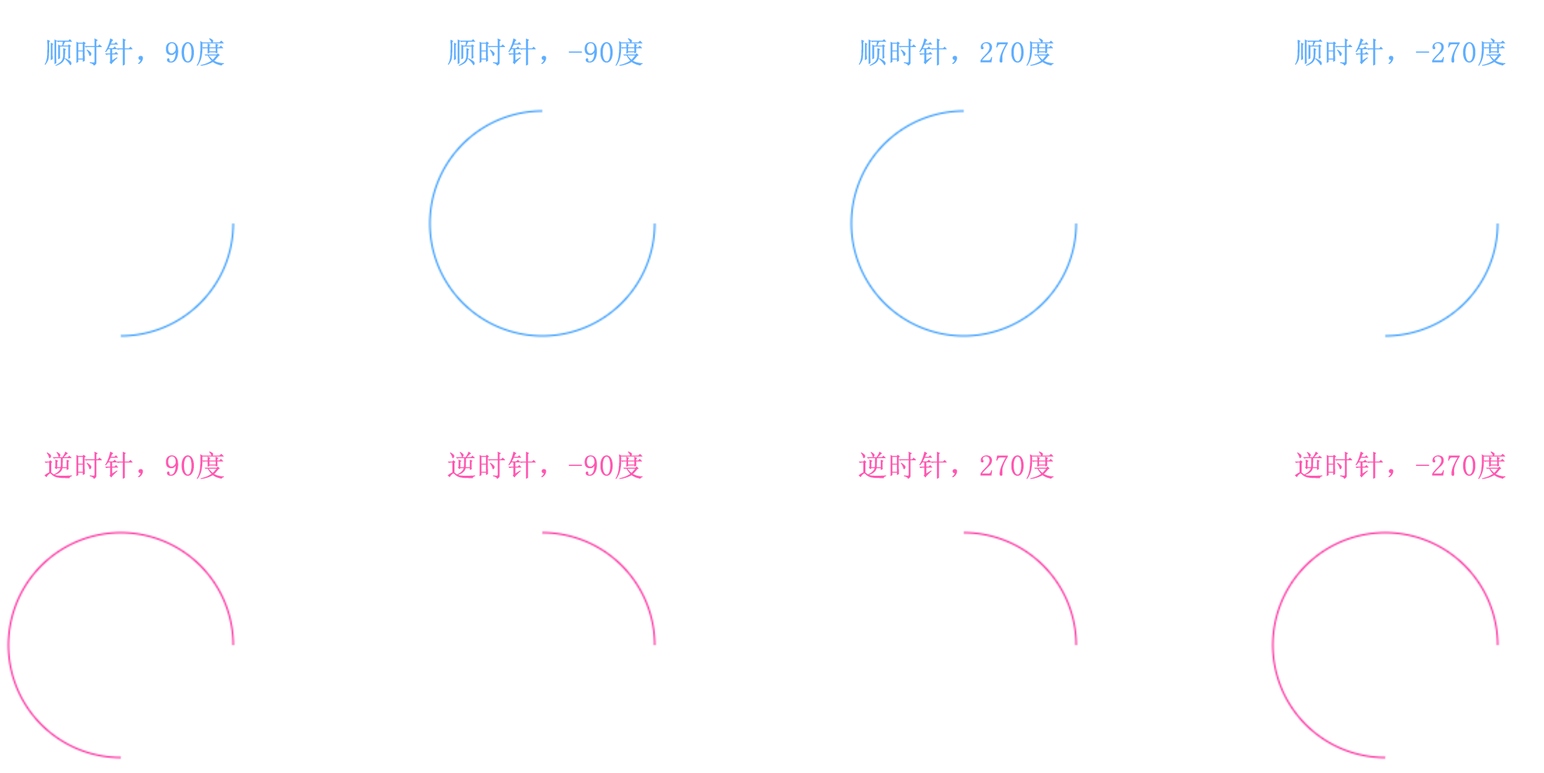
<style>
.page{position:relative;width:1544px;height:773px;background:#ffffff}
.page>*{position:absolute;margin:0}
.t1{font:29.5px "SimSun";color:#5dafff;font-weight:bold}
.t2{font:29.5px "SimSun";color:#ff57b2;font-weight:bold}
</style>
<div class="page">
<p class="t1" style="left:44px;top:38px;width:180px;height:28px">顺时针，90度</p>
<p class="t1" style="left:447px;top:38px;width:196px;height:28px">顺时针，-90度</p>
<p class="t1" style="left:858px;top:38px;width:195px;height:28px">顺时针，270度</p>
<p class="t1" style="left:1294px;top:38px;width:211px;height:28px">顺时针，-270度</p>
<p class="t2" style="left:44px;top:451px;width:180px;height:28px">逆时针，90度</p>
<p class="t2" style="left:447px;top:451px;width:196px;height:28px">逆时针，-90度</p>
<p class="t2" style="left:858px;top:451px;width:195px;height:28px">逆时针，270度</p>
<p class="t2" style="left:1294px;top:451px;width:211px;height:28px">逆时针，-270度</p>
</div>
